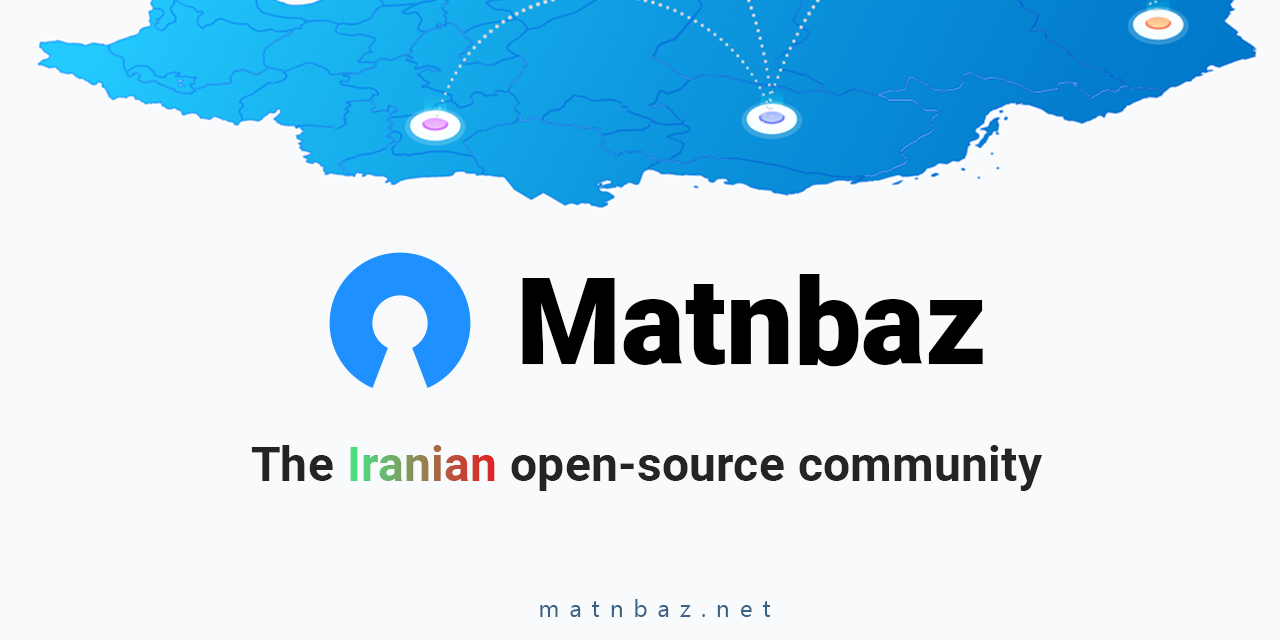
<style>
.page{position:relative;width:1280px;height:640px;background:#f9fafb}
.page>*{position:absolute;margin:0}
.t1{font:120px "Vazir-Black";color:#000000}
.t2{font:48px "Vazir-Bold";letter-spacing:0.005em;color:#242424}
.t3{font:48px "Vazir-Bold";letter-spacing:0.005em;color:#f9fafb}
.t4{font:48px "Vazir-Bold";letter-spacing:0.005em}
.t5{font:24px "SegoeUI";letter-spacing:0.42em;color:#3b6187}
</style>
<div class="page">
<p class="t1" style="left:522px;top:274px;width:461px;height:93px">Matnbaz</p>
<p class="t2" style="left:251px;top:445px;width:791px;height:46px">The <span class="t3">Iranian</span> open-source community</p>
<p class="t4" style="left:350px;top:445px;width:145px;height:36px">Iranian</p>
<p class="t5" style="left:540px;top:599px;width:231px;height:18px">matnbaz.net</p>
</div>
